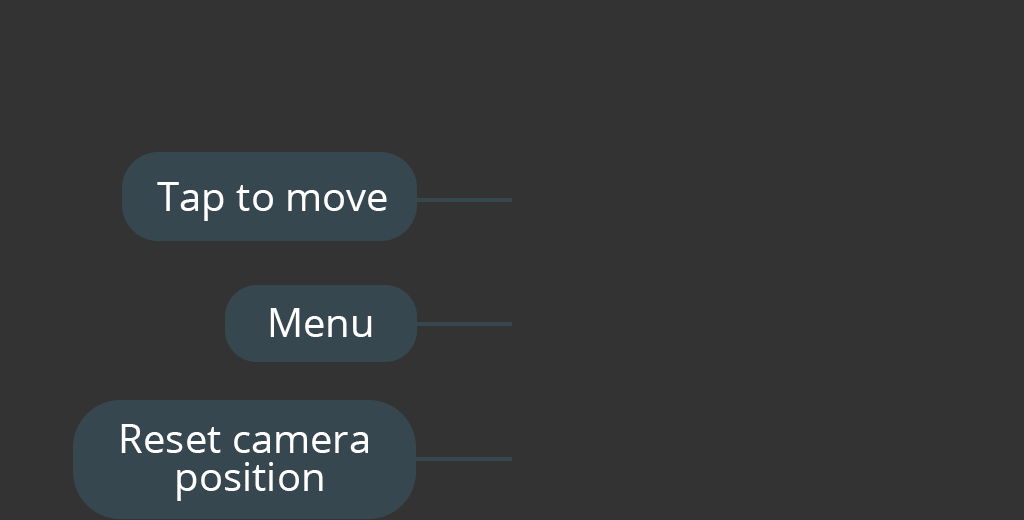
<style>
.page{position:relative;width:1024px;height:520px;background:#333333}
.page>*{position:absolute;margin:0}
.t1{font:40px "OpenSans";color:#ffffff}
.t2{font:40px/38px "OpenSans";color:#ffffff}
</style>
<div class="page">
<p class="t1" style="left:157px;top:182px;width:230px;height:39px">Tap to move</p>
<p class="t1" style="left:270px;top:308px;width:102px;height:29px">Menu</p>
<p class="t2" style="left:121px;top:424px;width:247px;height:77px;text-align:center">Reset camera<br> position</p>
</div>
